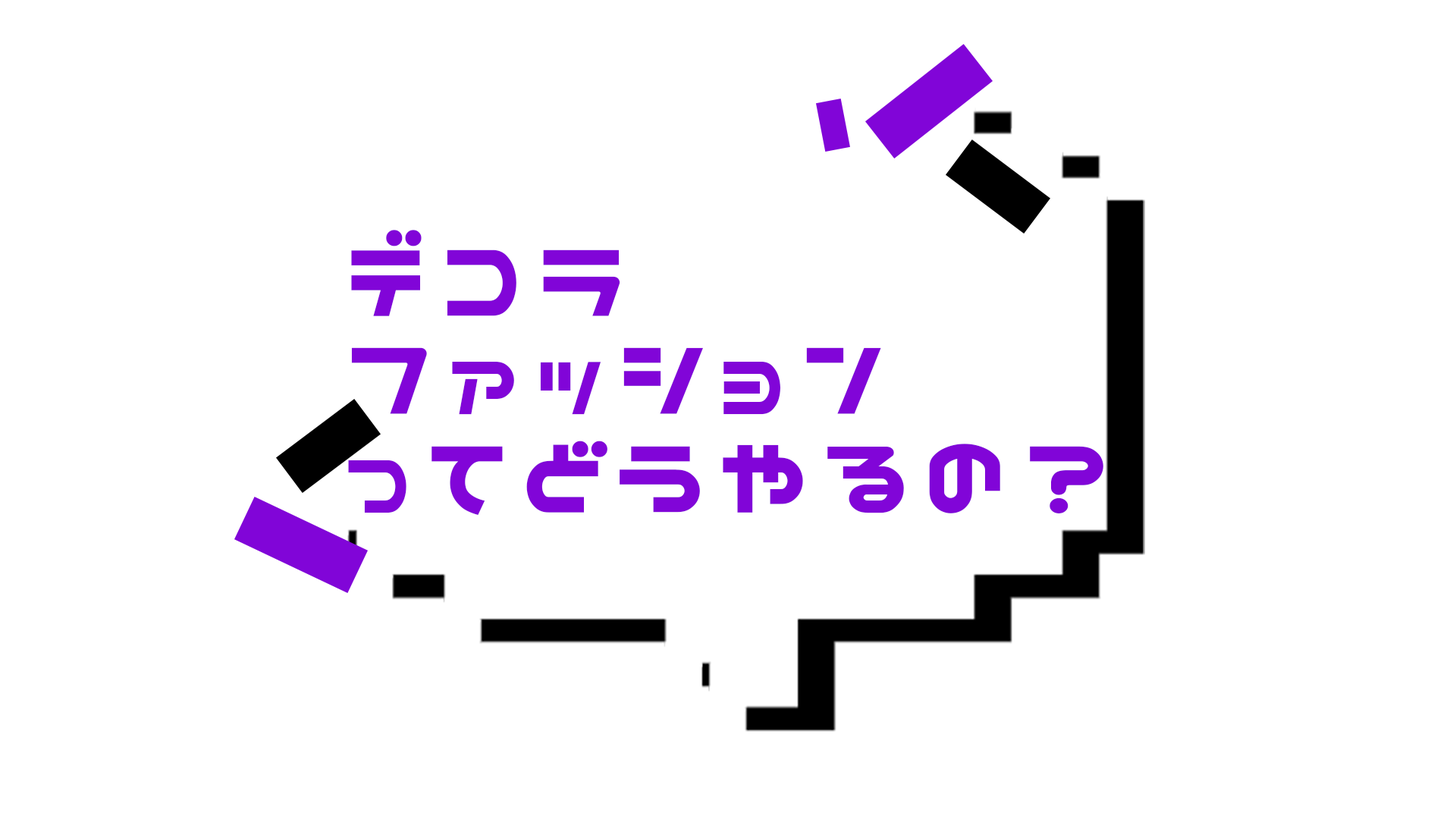
<style>
.page{position:relative;width:1456px;height:819px;background:#ffffff}
.page>*{position:absolute;margin:0}
.t1{font:113.8px/16.4px "Nicoca";letter-spacing:0.1em;color:#8105d8}
</style>
<div class="page">
<p class="t1" style="left:348px;top:230px;width:755px;height:286px;text-align:justify">デコラ<br><br><br><br><br><br>ファッション<br><br><br><br><br><br>ってどうやるの？</p>
</div>
